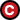
<style>
.page{position:relative;width:20px;height:20px;background:#c21c23}
.page>*{position:absolute;margin:0}
.t1{font:14px "CoolveticaRg-Regular";letter-spacing:0.01em;color:#ffffff;scale:1.1 1}
</style>
<div class="page">
<p class="t1" style="left:4px;top:5px;width:10px;height:11px">C</p>
</div>
